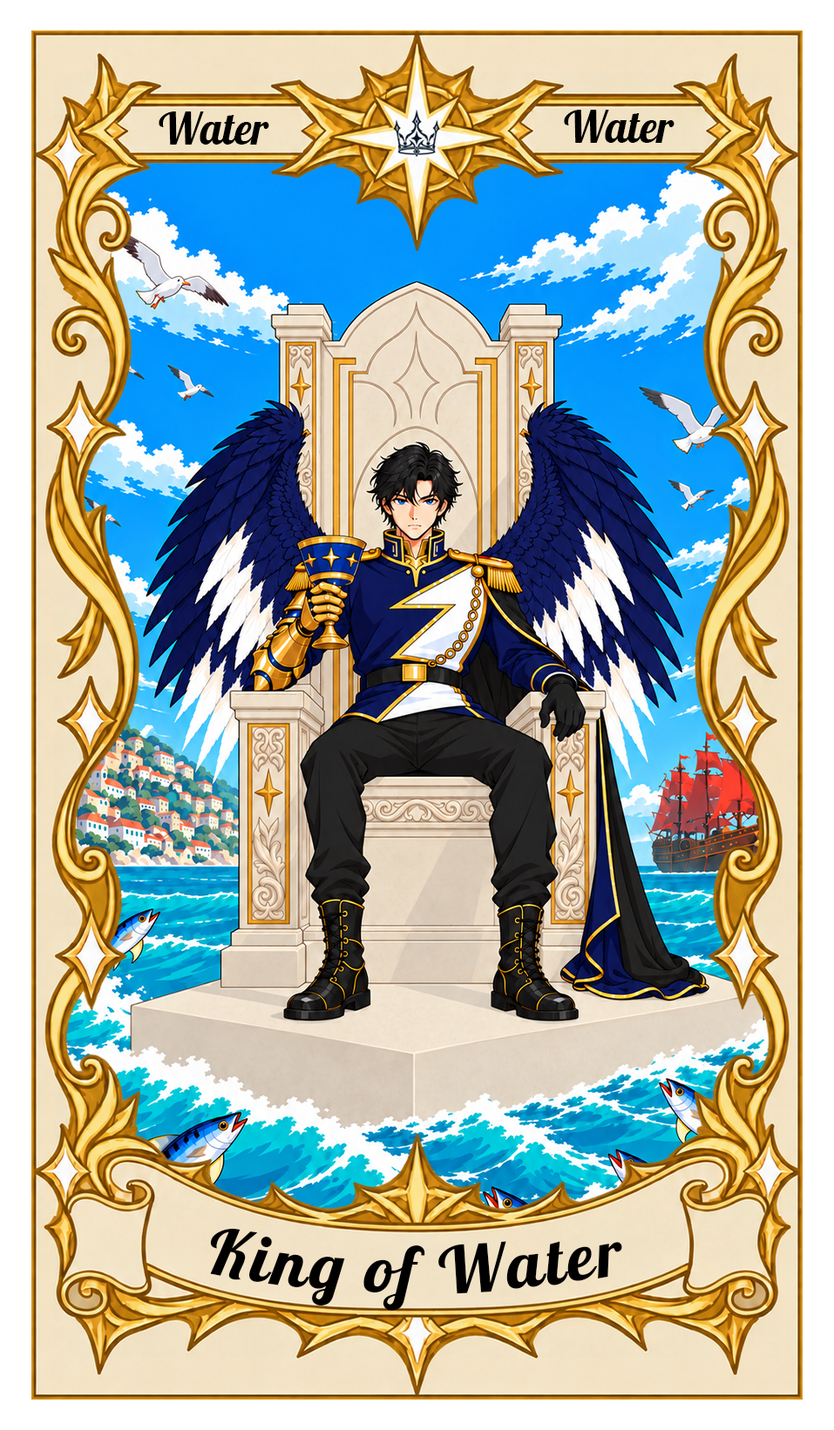
<style>
.page{position:relative;width:834px;height:1430px}
.page>*{position:absolute;margin:0}
.t1{font:43.6px "Lobster-Regular";color:#000000}
.t2{font:65.3px "Lobster-Regular";letter-spacing:0.05em;color:#000000}
</style>
<div class="page">
<p class="t1" style="left:159px;top:112px;width:110px;height:33px">Water</p>
<p class="t1" style="left:564px;top:110px;width:110px;height:33px">Water</p>
<p class="t2" style="left:210px;top:1228px;width:412px;height:83px">King of Water</p>
</div>
